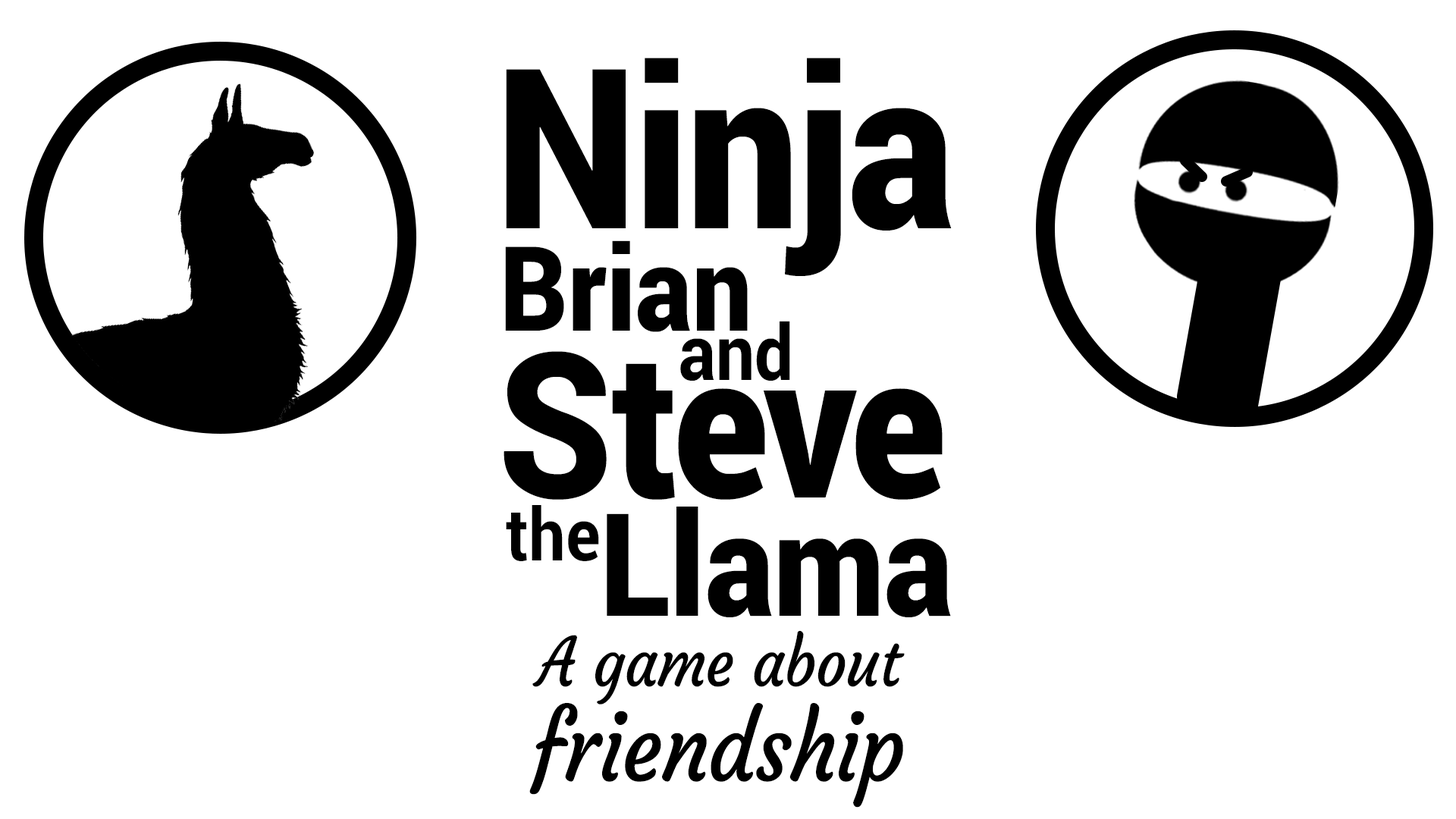
<style>
.page{position:relative;width:1456px;height:819px;background:#ffffff}
.page>*{position:absolute;margin:0}
.t1{font:223.5px "Roboto-Black";color:#000000;scale:0.9 1}
.t2{font:117.8px "Roboto-Black";color:#000000;scale:0.9 1}
.t3{font:76.7px "Roboto-Bold";color:#000000;scale:0.9 1}
.t4{font:202.2px "Roboto-Black";color:#000000;scale:0.9 1}
.t5{font:72.7px "Roboto-Bold";color:#000000;scale:0.9 1}
.t6{font:143.4px "Roboto-Black";color:#000000;scale:0.9 1}
.t7{font:67.3px/70.3px "Courgette-Regular";color:#000000;scale:0.9 1}
.t8{font:94.8px/94.8px "Courgette-Regular";color:#000000;scale:0.9 1}
</style>
<div class="page">
<p class="t1" style="left:506px;top:58px;width:446px;height:218px">Ninja</p>
<p class="t2" style="left:505px;top:240px;width:243px;height:92px">Brian</p>
<p class="t3" style="left:680px;top:321px;width:110px;height:60px">and</p>
<p class="t4" style="left:504px;top:351px;width:439px;height:149px">Steve</p>
<p class="t5" style="left:506px;top:505px;width:93px;height:56px">the</p>
<p class="t6" style="left:607px;top:507px;width:344px;height:110px">Llama</p>
<p class="t7" style="left:529px;top:631px;width:376px;height:177px;text-align:center">A game about<br><span class="t8">friendship</span></p>
</div>
